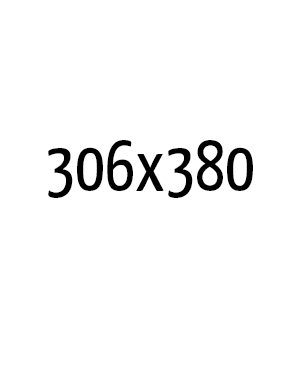
<style>
.page{position:relative;width:306px;height:380px;background:#ffffff}
.page>*{position:absolute;margin:0}
.t1{font:72px "YanoneKaffeesatz-Regular";color:#000000}
</style>
<div class="page">
<p class="t1" style="left:48px;top:140px;width:205px;height:58px">306x380</p>
</div>
